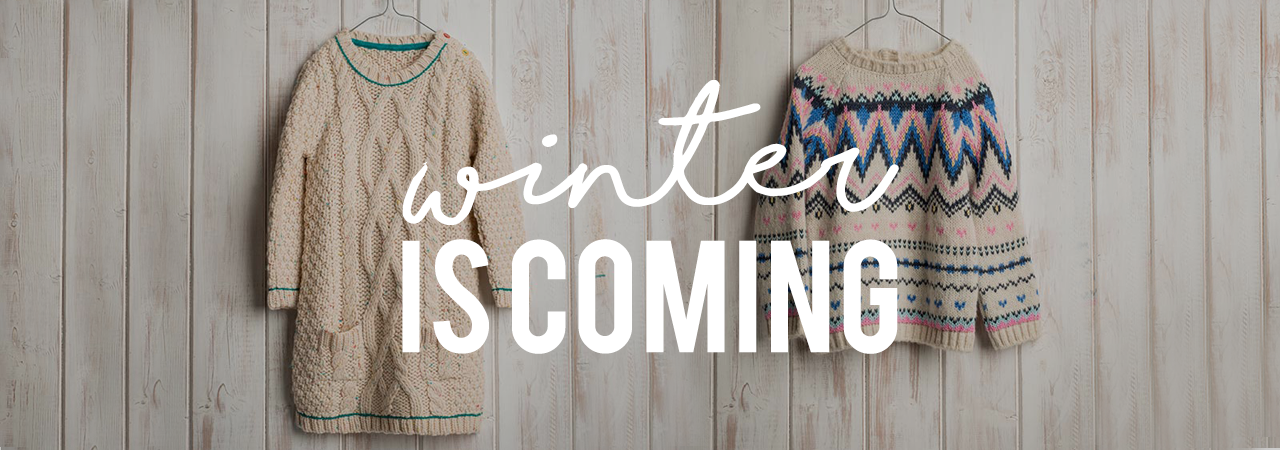
<style>
.page{position:relative;width:1280px;height:450px}
.page>*{position:absolute;margin:0}
.t1{font:125px "ShorelinesScriptBold";color:#ffffff}
.t2{font:125px "Bebas";color:#ffffff}
</style>
<div class="page">
<p class="t1" style="left:402px;top:80px;width:497px;height:145px">winter</p>
<p class="t2" style="left:402px;top:239px;width:496px;height:115px">is coming</p>
</div>
